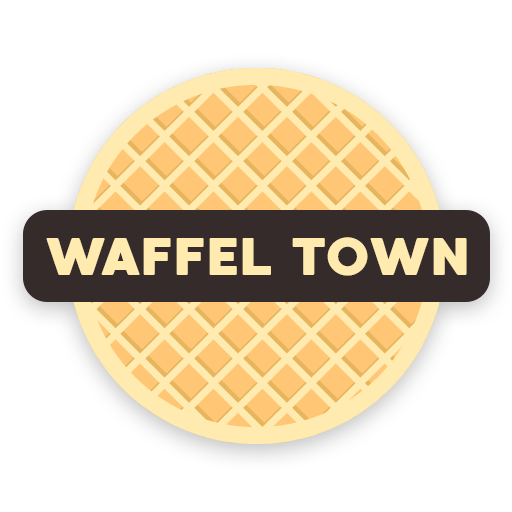
<style>
.page{position:relative;width:512px;height:512px;background:#ffffff}
.page>*{position:absolute;margin:0}
.t1{font:53px "MADEWaffleSoft";color:#ffebb0}
</style>
<div class="page">
<p class="t1" style="left:46px;top:237px;width:421px;height:39px">WAFFEL TOWN</p>
</div>
